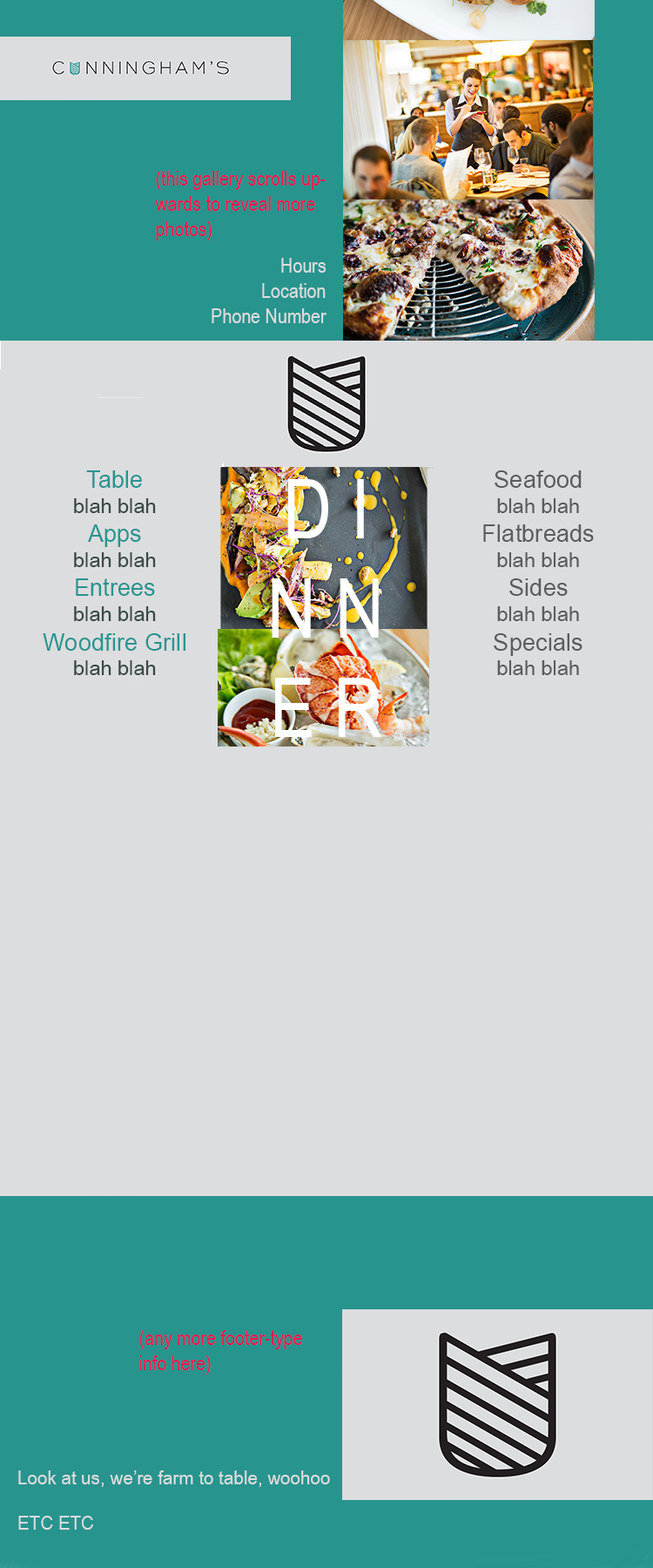
<style>
.page{position:relative;width:653px;height:1568px;background:#dcdddf}
.page>*{position:absolute;margin:0}
.t1{font:20.9px "ArialNarrow";color:#f5154f}
.t2{font:20.9px "ArialNarrow";color:#dcdddf}
.t3{font:24.3px "ArialNarrow";color:#28948e;scale:1.2 1}
.t4{font:20.9px "ArialNarrow";color:#384948;scale:1.2 1}
.t5{font:24.3px "ArialNarrow";color:#5b5c5e;scale:1.2 1}
.t6{font:20.9px "ArialNarrow";color:#5b5c5e;scale:1.2 1}
.t7{font:82.8px "ArialNarrow";color:#ffffff}
.t8{font:19.1px "ArialNarrow";color:#dcdddf;scale:1.14 1}
</style>
<div class="page">
<p class="t1" style="left:155px;top:171px;width:171px;height:69px">(this gallery scrolls upwards to reveal more photos)</p>
<p class="t2" style="left:212px;top:258px;width:115px;height:65px;text-align:right">Hours<br>Location<br>Phone Number</p>
<p class="t3" style="left:43px;top:470px;width:143px;height:205px;text-align:center">Table<br><span class="t4">blah blah<br></span>Apps<br><span class="t4">blah blah<br></span>Entrees<br><span class="t4">blah blah<br></span>Woodfire Grill<br><span class="t4">blah blah</span></p>
<p class="t5" style="left:483px;top:470px;width:111px;height:205px;text-align:center">Seafood<br><span class="t6">blah blah<br></span>Flatbreads<br><span class="t6">blah blah<br></span>Sides<br><span class="t6">blah blah<br></span>Specials<br><span class="t6">blah blah</span></p>
<p class="t7" style="left:272px;top:479px;width:110px;height:258px;text-align:center">D I<br>N N<br>E R</p>
<p class="t1" style="left:139px;top:1330px;width:163px;height:45px">(any more footer-type info here)</p>
<p class="t8" style="left:18px;top:1470px;width:312px;height:60px">Look at us, we’re farm to table, woohoo<br><br>ETC ETC</p>
</div>
